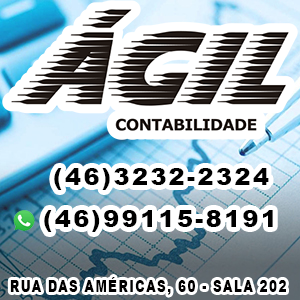
<style>
.page{position:relative;width:300px;height:300px;background:#ffffff}
.page>*{position:absolute;margin:0}
.t1{font:24px "Arial-Black";letter-spacing:0.1em;color:#000000}
.t2{font:17.2px "Arial-Black";letter-spacing:0.1em;color:#010000;scale:0.72 1}
</style>
<div class="page">
<p class="t1" style="left:54px;top:168px;width:215px;height:22px">(46)3232-2324</p>
<p class="t1" style="left:44px;top:210px;width:229px;height:22px">(46)99115-8191</p>
<p class="t2" style="left:10px;top:277px;width:276px;height:18px">RUA DAS AMÉRICAS, 60 - SALA 202</p>
</div>
